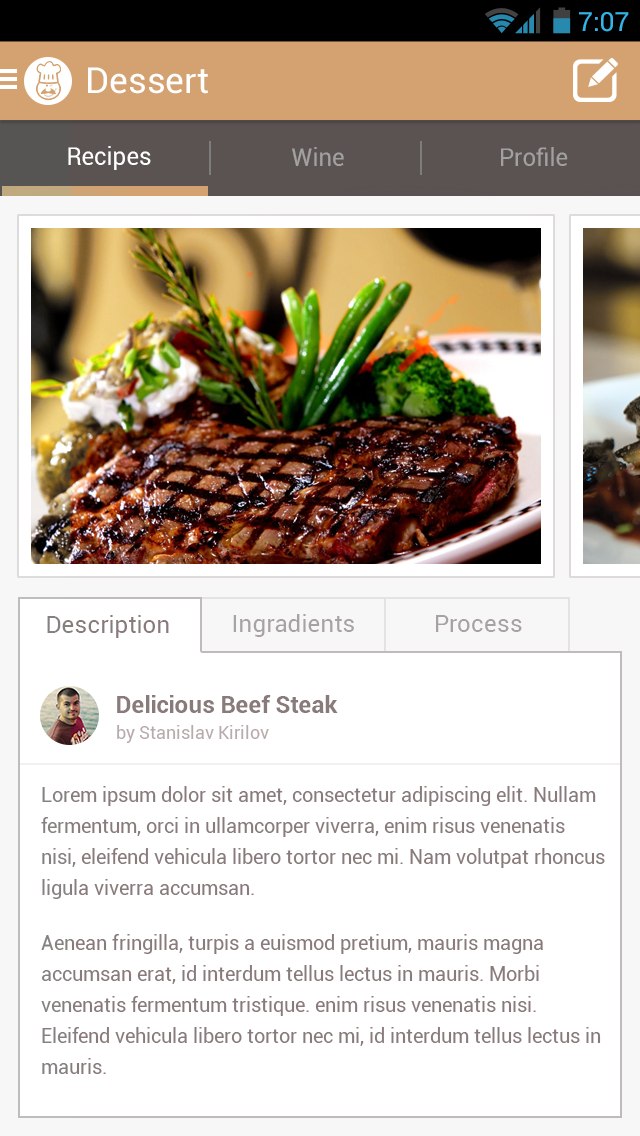
<style>
.page{position:relative;width:640px;height:1136px;background:#ffffff}
.page>*{position:absolute;margin:0}
.t1{font:26.6px "Roboto-Regular";color:#33b5e5}
.t2{font:35.8px "Roboto-Regular";color:#ffffff}
.t3{font:25px "Roboto-Regular";color:#fefefe;scale:0.96 1}
.t4{font:25px "Roboto-Regular";color:#a1a1a1;scale:0.96 1}
.t5{font:24px "Roboto-Regular";color:#8a7b7b}
.t6{font:24px "Roboto-Regular";color:#a9a2a2}
.t7{font:24px "Roboto-Bold";color:#8a7b7b}
.t8{font:18px "Roboto-Regular";color:#b9abab}
.t9{font:20px/31px "Roboto-Regular";color:#8a7b7b}
</style>
<div class="page">
<p class="t1" style="left:579px;top:12px;width:50px;height:20px">7:07</p>
<p class="t2" style="left:88px;top:67px;width:120px;height:27px">Dessert</p>
<p class="t3" style="left:68px;top:146px;width:83px;height:24px">Recipes</p>
<p class="t4" style="left:292px;top:147px;width:52px;height:19px">Wine</p>
<p class="t4" style="left:501px;top:147px;width:67px;height:19px">Profile</p>
<p class="t5" style="left:47px;top:615px;width:122px;height:23px">Description</p>
<p class="t6" style="left:233px;top:614px;width:121px;height:23px">Ingradients</p>
<p class="t6" style="left:436px;top:615px;width:86px;height:17px">Process</p>
<p class="t7" style="left:117px;top:695px;width:221px;height:18px">Delicious Beef Steak</p>
<p class="t8" style="left:117px;top:725px;width:152px;height:18px">by Stanislav Kirilov</p>
<p class="t9" style="left:41px;top:786px;width:564px;height:113px">Lorem ipsum dolor sit amet, consectetur adipiscing elit. Nullam fermentum, orci in ullamcorper viverra, enim risus venenatis <br>nisi, eleifend vehicula libero tortor nec mi. Nam volutpat rhoncus ligula viverra accumsan.</p>
<p class="t9" style="left:41px;top:934px;width:560px;height:140px">Aenean fringilla, turpis a euismod pretium, mauris magna accumsan erat, id interdum tellus lectus in mauris. Morbi venenatis fermentum tristique. enim risus venenatis nisi. <br>Eleifend vehicula libero tortor nec mi, id interdum tellus lectus in mauris.</p>
</div>
